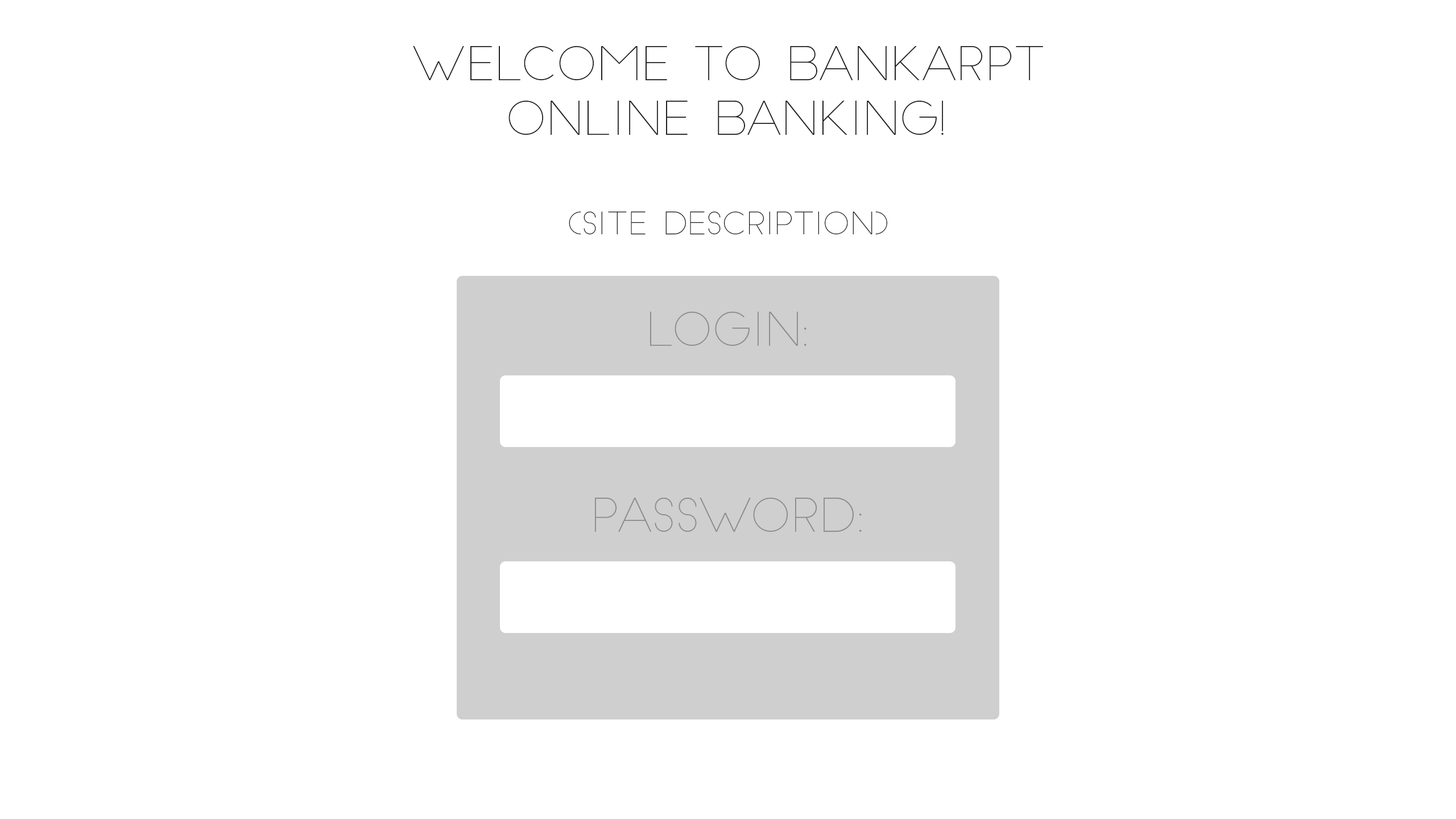
<style>
.page{position:relative;width:1456px;height:819px;background:#ffffff}
.page>*{position:absolute;margin:0}
.t1{font:45.5px "SlimJoe";color:#202020}
.t2{font:30.4px "SlimJoe";color:#202020}
.t3{font:45.5px "SlimJoe";color:#8c8c8c}
</style>
<div class="page">
<p class="t1" style="left:413px;top:46px;width:630px;height:89px;text-align:center">WElcome to bankarpt<br>online banking!</p>
<p class="t2" style="left:569px;top:211px;width:318px;height:24px">(site description)</p>
<p class="t3" style="left:650px;top:312px;width:156px;height:34px">login:</p>
<p class="t3" style="left:595px;top:498px;width:267px;height:34px">password:</p>
</div>
